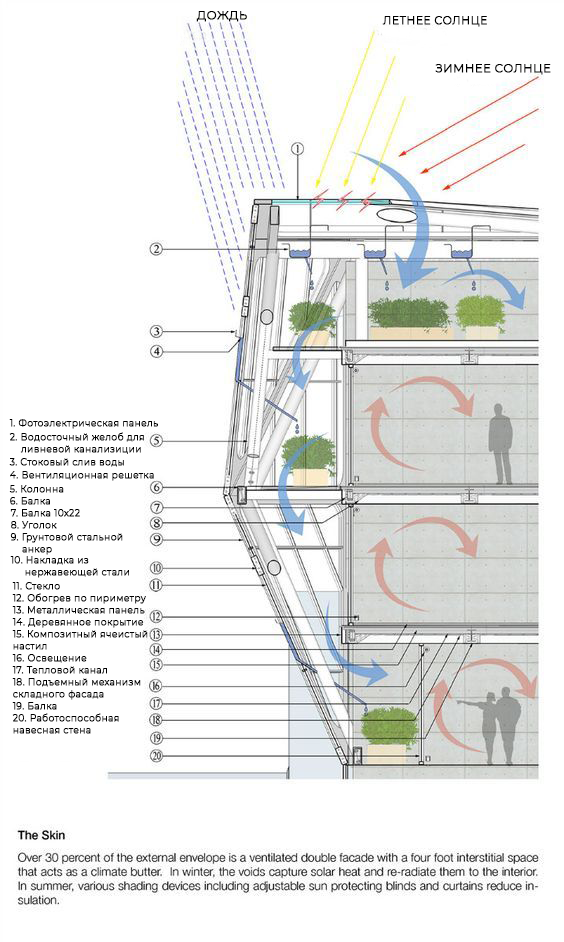
<style>
.page{position:relative;width:564px;height:942px;background:#ffffff}
.page>*{position:absolute;margin:0}
.t1{font:11.6px "Montserrat-Light";letter-spacing:0.03em;color:#000000;font-weight:bold}
.t2{font:10.8px "Montserrat-Light";letter-spacing:0.03em;color:#000000;font-weight:bold}
.t3{font:11.4px "Montserrat-Light";letter-spacing:0.03em;color:#000000;font-weight:bold}
.t4{font:9px "Montserrat-Light";letter-spacing:0.03em;color:#000000;font-weight:bold}
.t5{font:9px/12px "Montserrat-Light";letter-spacing:0.03em;color:#000000;font-weight:bold}
</style>
<div class="page">
<p class="t1" style="left:196px;top:11px;width:51px;height:11px">ДОЖДЬ</p>
<p class="t2" style="left:382px;top:16px;width:105px;height:11px">ЛЕТНЕЕ СОЛНЦЕ</p>
<p class="t3" style="left:435px;top:64px;width:116px;height:11px">ЗИМНЕЕ СОЛНЦЕ</p>
<p class="t4" style="left:9px;top:419px;width:149px;height:10px">1. Фотоэлектрическая панель</p>
<p class="t5" style="left:9px;top:432px;width:135px;height:22px">2. Водосточный желоб для <br>    ливневой канализиции</p>
<p class="t4" style="left:9px;top:458px;width:115px;height:9px">3. Стоковый слив воды</p>
<p class="t4" style="left:10px;top:471px;width:144px;height:10px">4. Вентиляционная решетка</p>
<p class="t4" style="left:9px;top:485px;width:55px;height:8px">5. Колонна</p>
<p class="t4" style="left:10px;top:497px;width:40px;height:8px">6. Балка</p>
<p class="t4" style="left:10px;top:509px;width:70px;height:8px">7. Балка 10х22</p>
<p class="t4" style="left:11px;top:521px;width:46px;height:8px">8. Уголок</p>
<p class="t5" style="left:10px;top:533px;width:113px;height:22px">9. Грунтовой стальной <br>    анкер</p>
<p class="t5" style="left:10px;top:556px;width:119px;height:22px">10. Накладка из <br>     нержавеющей стали</p>
<p class="t5" style="left:12px;top:582px;width:136px;height:152px">11. Стекло<br>12. Обогрев по пириметру <br>13. Металлическая панель<br>14. Деревянное покрытие<br>15. Композитный ячеистый <br>настил<br>16. Освещение <br>17. Тепловой канал<br>18. Подъемный механизм <br>складного фасада<br>19. Балка<br>20. Работоспособная <br>навесная стена</p>
</div>
